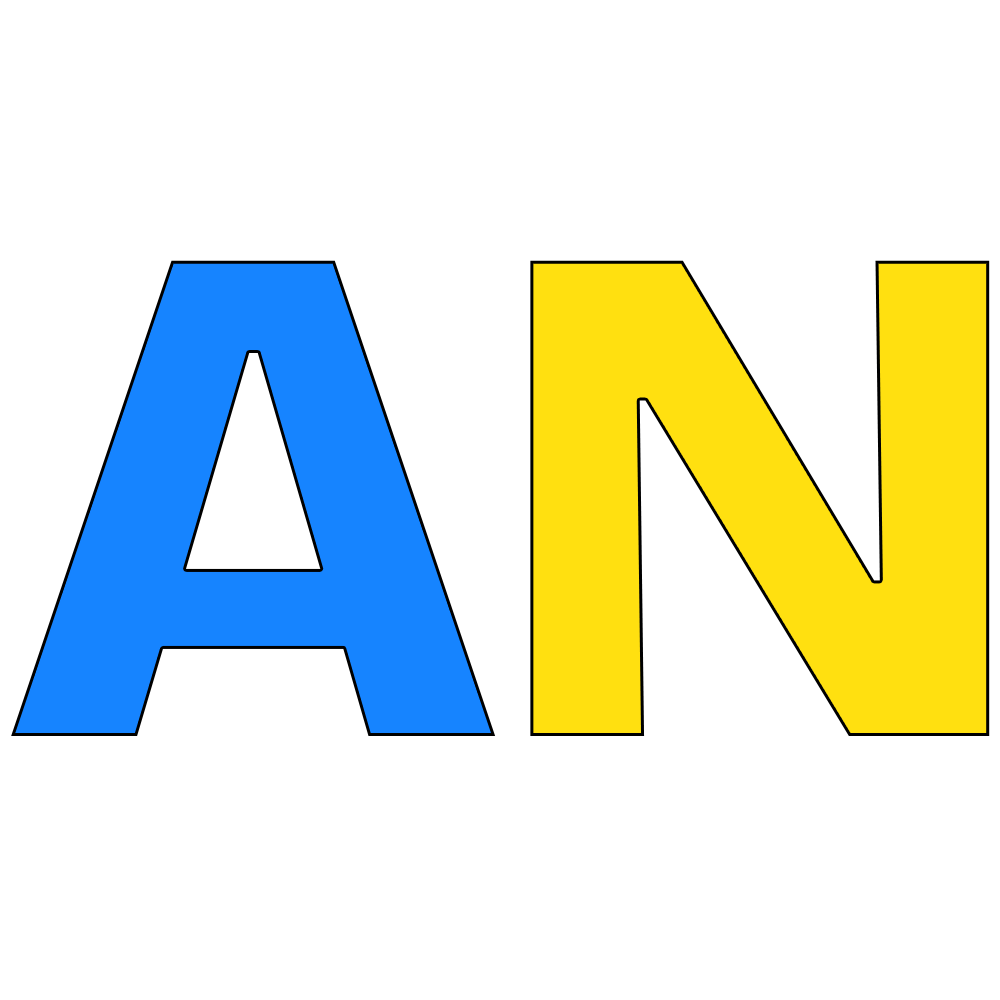
<style>
.page{position:relative;width:1000px;height:1000px;background:#ffffff}
.page>*{position:absolute;margin:0}
.t1{font:720.1px "BricolageGrotesque-ExtraBold";letter-spacing:-0.02em;color:#1684ff}
.t2{font:720.1px "BricolageGrotesque-ExtraBold";letter-spacing:-0.02em;color:#ffe010}
</style>
<div class="page">
<p class="t1" style="left:11px;top:260px;width:979px;height:476px">A<span class="t2">N</span></p>
</div>
